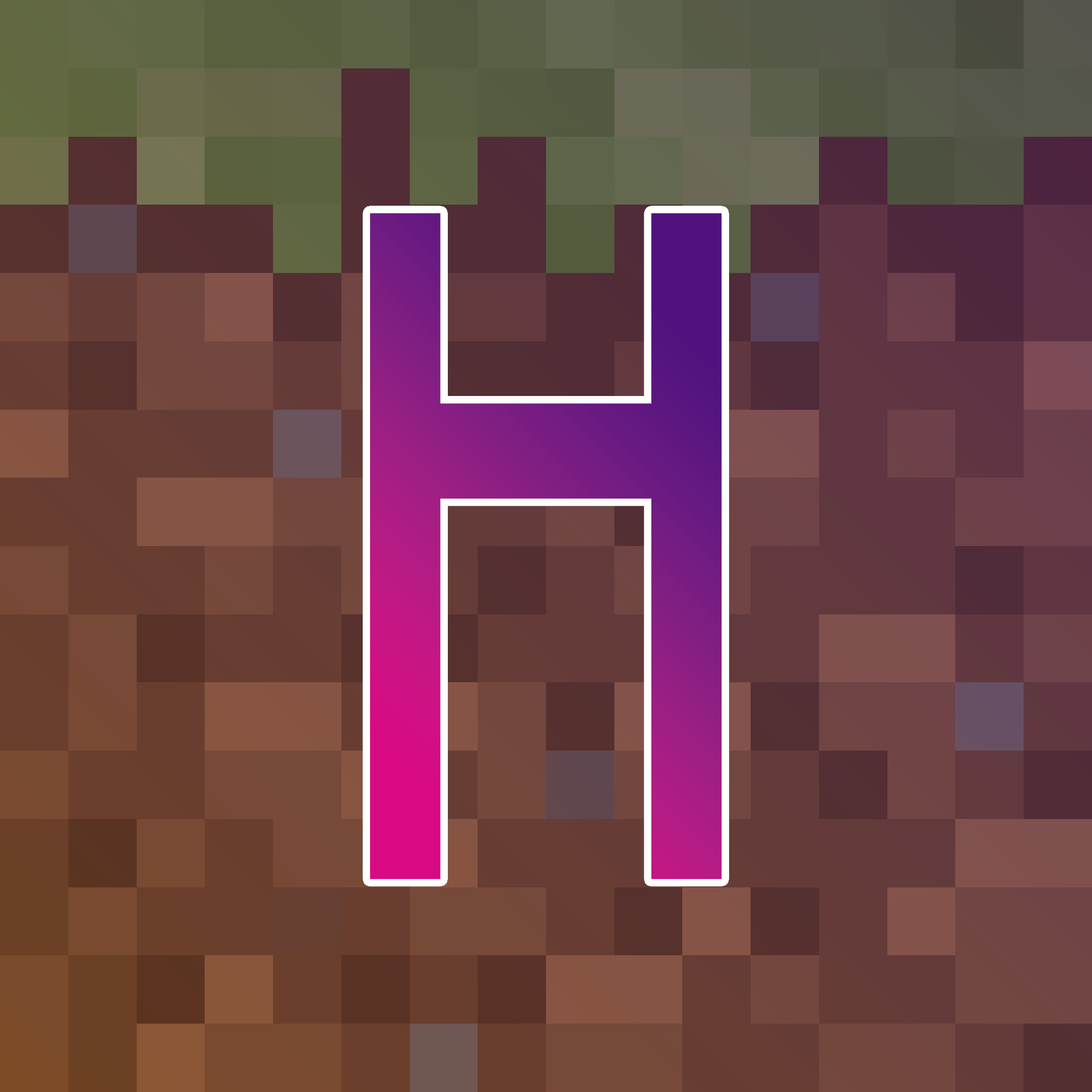
<style>
.page{position:relative;width:1092px;height:1092px}
.page>*{position:absolute;margin:0}
.t1{font:951.2px "Minecraft-Regular";scale:0.74 1}
</style>
<div class="page">
<p class="t1" style="left:370px;top:213px;width:352px;height:666px">H</p>
</div>
